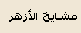
<style>
.page{position:relative;width:81px;height:33px;background:#f0e7d6}
.page>*{position:absolute;margin:0}
.t1{font:11px "Tahoma-Bold";color:#000000}
</style>
<div class="page">
<p class="t1" style="left:9px;top:9px;width:68px;height:13px">مشايخ الأزهر</p>
</div>
